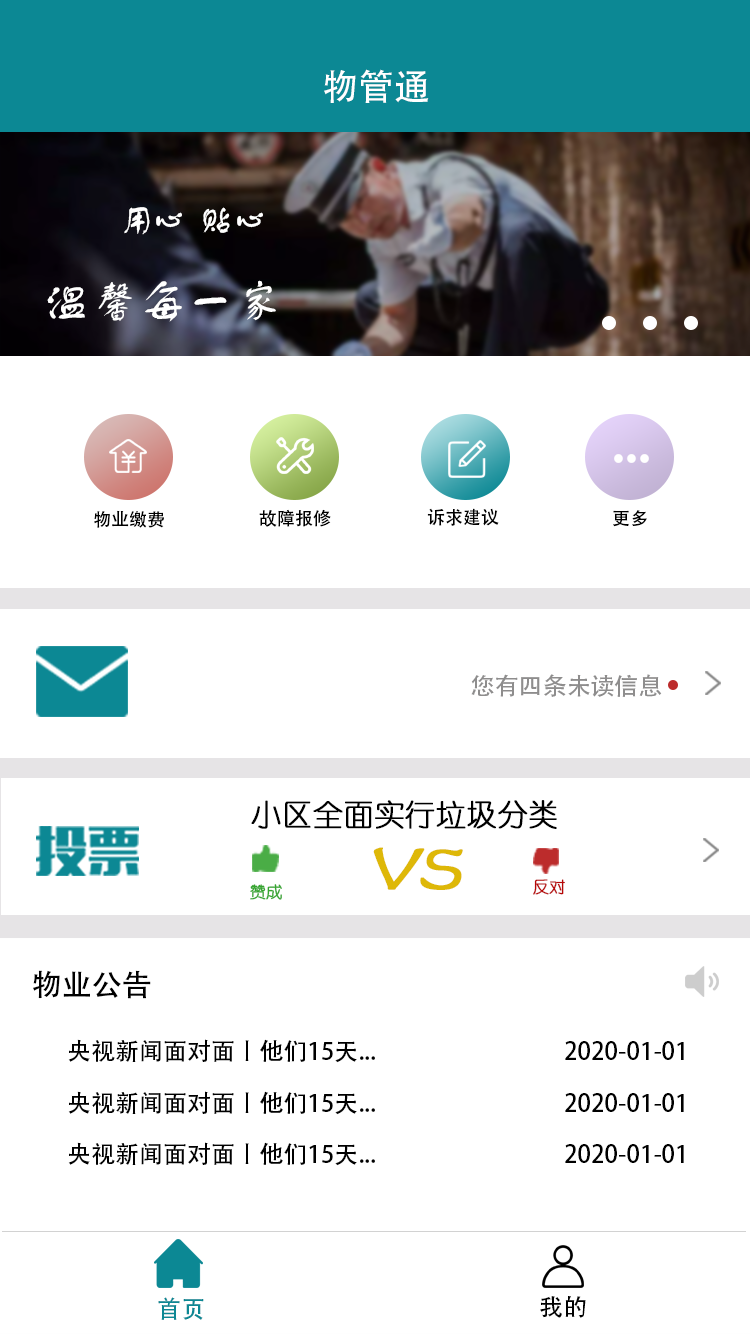
<style>
.page{position:relative;width:750px;height:1334px;background:#ffffff}
.page>*{position:absolute;margin:0}
.t1{font:36px "AdobeHeitiStd-Regular";color:#ffffff}
.t2{font:36px "FZSTK--GBK1-0";letter-spacing:-0.1em;color:#ffffff}
.t3{font:48px "FZSTK--GBK1-0";color:#ffffff}
.t4{font:18px "AdobeHeitiStd-Regular";color:#000000}
.t5{font:24px "AdobeHeitiStd-Regular";color:#8e8d8d}
.t6{font:30px "YouYuan";color:#000000;font-weight:bold}
.t7{font:72.2px "FZSTK--GBK1-0";color:#deb808;font-weight:bold;font-style:italic}
.t8{font:16px "YouYuan";color:#b70707;font-weight:bold}
.t9{font:16px "YouYuan";color:#34a62e;font-weight:bold}
.t10{font:30.1px "AdobeHeitiStd-Regular";color:#000000}
.t11{font:24.1px "AdobeHeitiStd-Regular";color:#000000}
.t12{font:24px "AdobeHeitiStd-Regular";color:#0c8894}
.t13{font:24px "AdobeHeitiStd-Regular";color:#000000}
</style>
<div class="page">
<p class="t1" style="left:324px;top:69px;width:105px;height:34px">物管通</p>
<p class="t2" style="left:124px;top:207px;width:139px;height:28px">用心   贴心</p>
<p class="t3" style="left:47px;top:280px;width:229px;height:42px">温馨每一家</p>
<p class="t4" style="left:94px;top:510px;width:70px;height:18px">物业缴费</p>
<p class="t4" style="left:259px;top:509px;width:72px;height:18px">故障报修</p>
<p class="t4" style="left:427px;top:508px;width:72px;height:18px">诉求建议</p>
<p class="t4" style="left:613px;top:510px;width:34px;height:17px">更多</p>
<p class="t5" style="left:471px;top:674px;width:191px;height:23px">您有四条未读信息</p>
<p class="t6" style="left:251px;top:800px;width:306px;height:29px">小区全面实行垃圾分类</p>
<p class="t7" style="left:373px;top:847px;width:90px;height:43px">VS</p>
<p class="t8" style="left:533px;top:879px;width:32px;height:16px">反对</p>
<p class="t9" style="left:250px;top:884px;width:32px;height:16px">赞成</p>
<p class="t10" style="left:33px;top:970px;width:118px;height:29px">物业公告</p>
<p class="t11" style="left:68px;top:1039px;width:616px;height:24px">央视新闻面对面丨他们15天...                                   2020-01-01</p>
<p class="t11" style="left:68px;top:1091px;width:616px;height:24px">央视新闻面对面丨他们15天...                                   2020-01-01</p>
<p class="t11" style="left:68px;top:1142px;width:616px;height:24px">央视新闻面对面丨他们15天...                                   2020-01-01</p>
<p class="t12" style="left:158px;top:1297px;width:46px;height:23px">首页</p>
<p class="t13" style="left:540px;top:1296px;width:46px;height:22px">我的</p>
</div>
